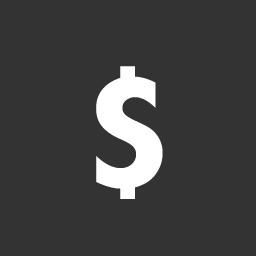
<style>
.page{position:relative;width:256px;height:256px;background:#333333}
.page>*{position:absolute;margin:0}
.t1{font:166.7px "AbadiMT-CondensedExtraBold";color:#ffffff}
</style>
<div class="page">
<p class="t1" style="left:96px;top:66px;width:67px;height:133px">$</p>
</div>
